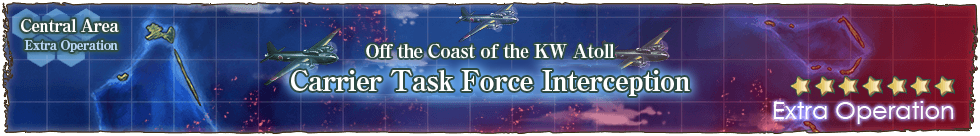
<style>
.page{position:relative;width:980px;height:136px}
.page>*{position:absolute;margin:0}
.t1{font:13px/22px "RyuminPro-ExBold";letter-spacing:-0.04em;color:#b9d7f5}
.t2{font:17px/22px "RyuminPro-ExBold";letter-spacing:-0.04em;color:#ffffff}
.t3{font:19px "RyuminPro-ExBold";letter-spacing:-0.04em;color:#ffffff}
.t4{font:28px "RyuminPro-ExBold";letter-spacing:-0.04em;color:#ffffff}
</style>
<div class="page">
<p class="t1" style="left:21px;top:19px;width:98px;height:33px"><span class="t2">Central Area<br>  </span>Extra Operation</p>
<p class="t3" style="left:366px;top:43px;width:249px;height:16px">Off the Coast of the KW Atoll</p>
<p class="t4" style="left:291px;top:70px;width:399px;height:26px">Carrier Task Force Interception</p>
</div>
